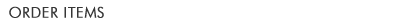
<style>
.page{position:relative;width:400px;height:24px;background:#ffffff}
.page>*{position:absolute;margin:0}
.t1{font:14.7px "FuturaBT-Light";letter-spacing:0.025em;color:#363636;text-transform:uppercase;font-weight:bold}
</style>
<div class="page">
<p class="t1" style="left:9px;top:6px;width:95px;height:12px">ORDER ITEMS</p>
</div>
